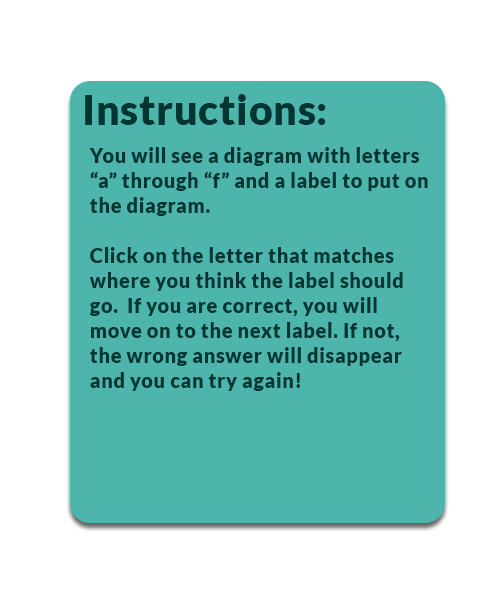
<style>
.page{position:relative;width:500px;height:600px;background:#4eb5ad}
.page>*{position:absolute;margin:0}
.t1{font:40.8px "Lato-Black";letter-spacing:0.02em;color:#013531}
.t2{font:20.4px/25px "Lato-Black";letter-spacing:0.02em;color:#013531}
</style>
<div class="page">
<p class="t1" style="left:85px;top:94px;width:241px;height:31px">Instructions:</p>
<p class="t2" style="left:89px;top:147px;width:339px;height:244px">You will see a diagram with letters<br>“a” through “f” and a label to put on <br>the diagram. <br><br>Click on the letter that matches<br>where you think the label should<br>go.  If you are correct, you will<br>move on to the next label. If not,<br>the wrong answer will disappear<br>and you can try again!</p>
</div>
